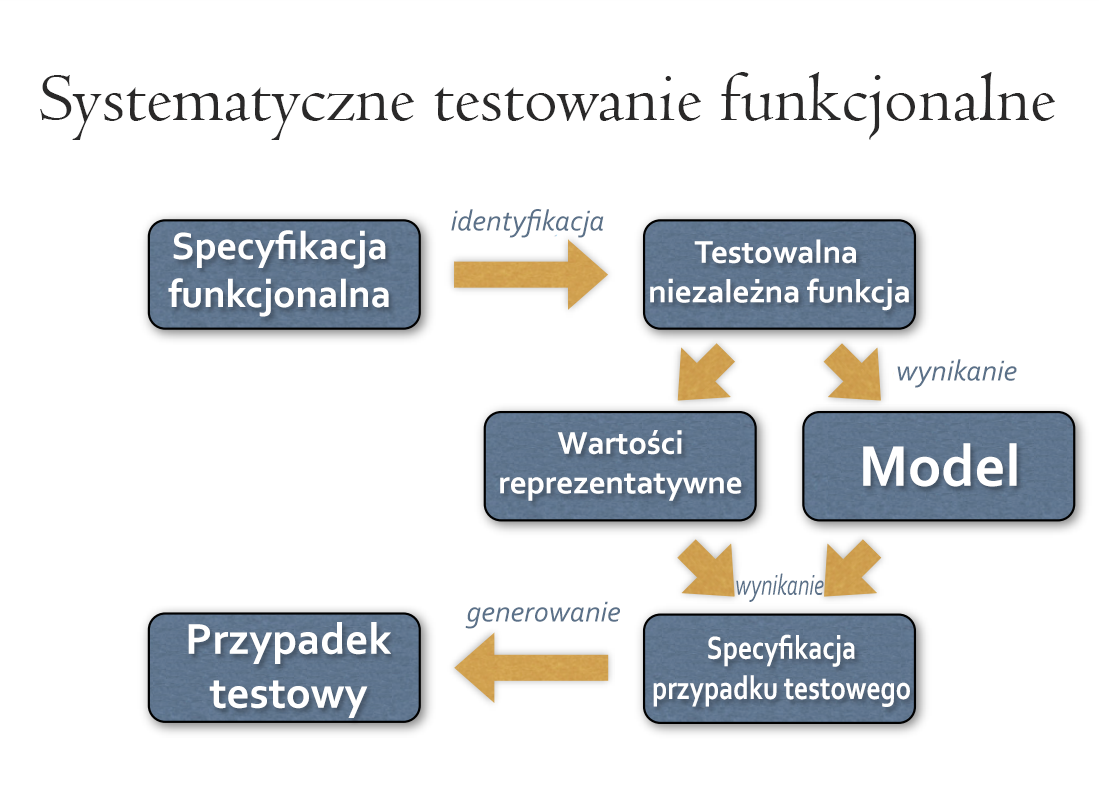
<style>
.page{position:relative;width:1099px;height:808px;background:#ffffff}
.page>*{position:absolute;margin:0}
.t1{font:72px "Centaur";color:#2a2929}
.t2{font:30px "Corbel-Italic";color:#5b7189}
.t3{font:40px "Corbel-Bold";color:#ffffff}
.t4{font:33px "Corbel-Bold";color:#ffffff}
.t5{font:60px "Corbel-Bold";color:#ffffff}
.t6{font:30px "Corbel-Italic";color:#5b7189;scale:0.73 1}
.t7{font:45px "Corbel-Bold";color:#ffffff}
.t8{font:33.5px "Corbel-Bold";color:#ffffff;scale:0.82 1}
</style>
<div class="page">
<p class="t1" style="left:40px;top:72px;width:1015px;height:68px">Systematyczne testowanie funkcjonalne</p>
<p class="t2" style="left:451px;top:209px;width:153px;height:29px">identyfikacja</p>
<p class="t3" style="left:168px;top:230px;width:221px;height:87px;text-align:center">Specyfikacja<br>funkcjonalna</p>
<p class="t4" style="left:650px;top:239px;width:259px;height:72px;text-align:center">Testowalna <br>niezależna funkcja</p>
<p class="t2" style="left:897px;top:359px;width:120px;height:29px">wynikanie</p>
<p class="t4" style="left:500px;top:430px;width:242px;height:71px;text-align:center">Wartości<br>reprezentatywne</p>
<p class="t5" style="left:863px;top:443px;width:154px;height:44px">Model</p>
<p class="t6" style="left:736px;top:573px;width:88px;height:29px">wynikanie</p>
<p class="t2" style="left:465px;top:601px;width:155px;height:28px">generowanie</p>
<p class="t7" style="left:188px;top:622px;width:203px;height:96px;text-align:center">Przypadek<br>testowy</p>
<p class="t8" style="left:653px;top:634px;width:257px;height:73px;text-align:center">Specyfikacja<br>przypadku testowego</p>
</div>
